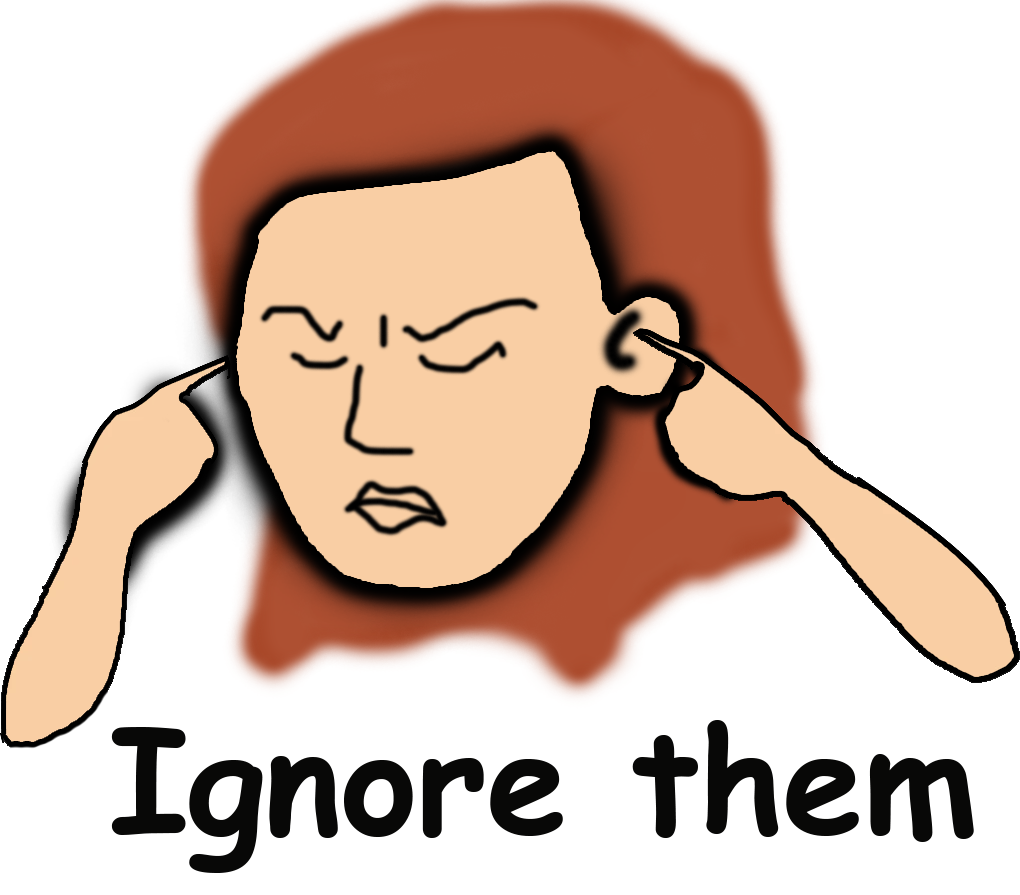
<style>
.page{position:relative;width:1020px;height:895px;background:#ffffff}
.page>*{position:absolute;margin:0}
.t1{font:145px "ComicSansMS-Bold";color:#080807}
</style>
<div class="page">
<p class="t1" style="left:111px;top:720px;width:863px;height:153px">Ignore them</p>
</div>
